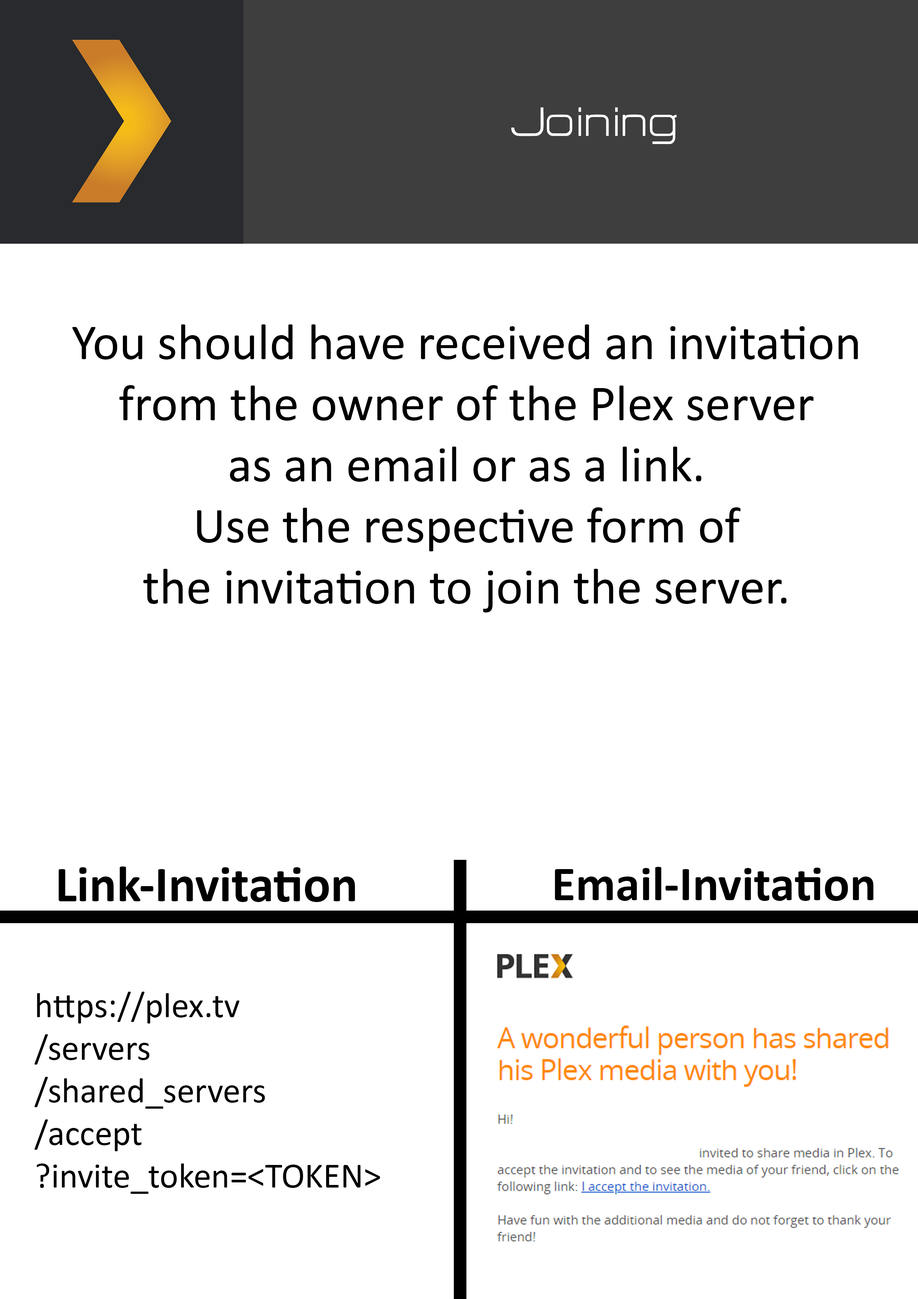
<style>
.page{position:relative;width:918px;height:1299px;background:#ffffff}
.page>*{position:absolute;margin:0}
.t1{font:50.9px "HURTMOLDPersonalUse-Regular";color:#ffffff}
.t2{font:50.9px "Calibri";color:#000000}
.t3{font:50.9px "Calibri-Bold";color:#000000}
.t4{font:49.4px "Calibri-Bold";color:#000000}
.t5{font:35.5px "Calibri";color:#000000}
</style>
<div class="page">
<p class="t1" style="left:511px;top:107px;width:166px;height:37px">Joining</p>
<p class="t2" style="left:72px;top:324px;width:786px;height:288px;text-align:center">You should have received an invitation<br>from the owner of the Plex server<br>as an email or as a link.<br>Use the respective form of<br>the invitation to join the server.</p>
<p class="t3" style="left:58px;top:866px;width:297px;height:36px">Link-Invitation</p>
<p class="t4" style="left:555px;top:867px;width:319px;height:34px">Email-Invitation</p>
<p class="t5" style="left:34px;top:991px;width:346px;height:203px">https://plex.tv<br>/servers<br>/shared_servers<br>/accept<br>?invite_token=&lt;TOKEN&gt;</p>
</div>
